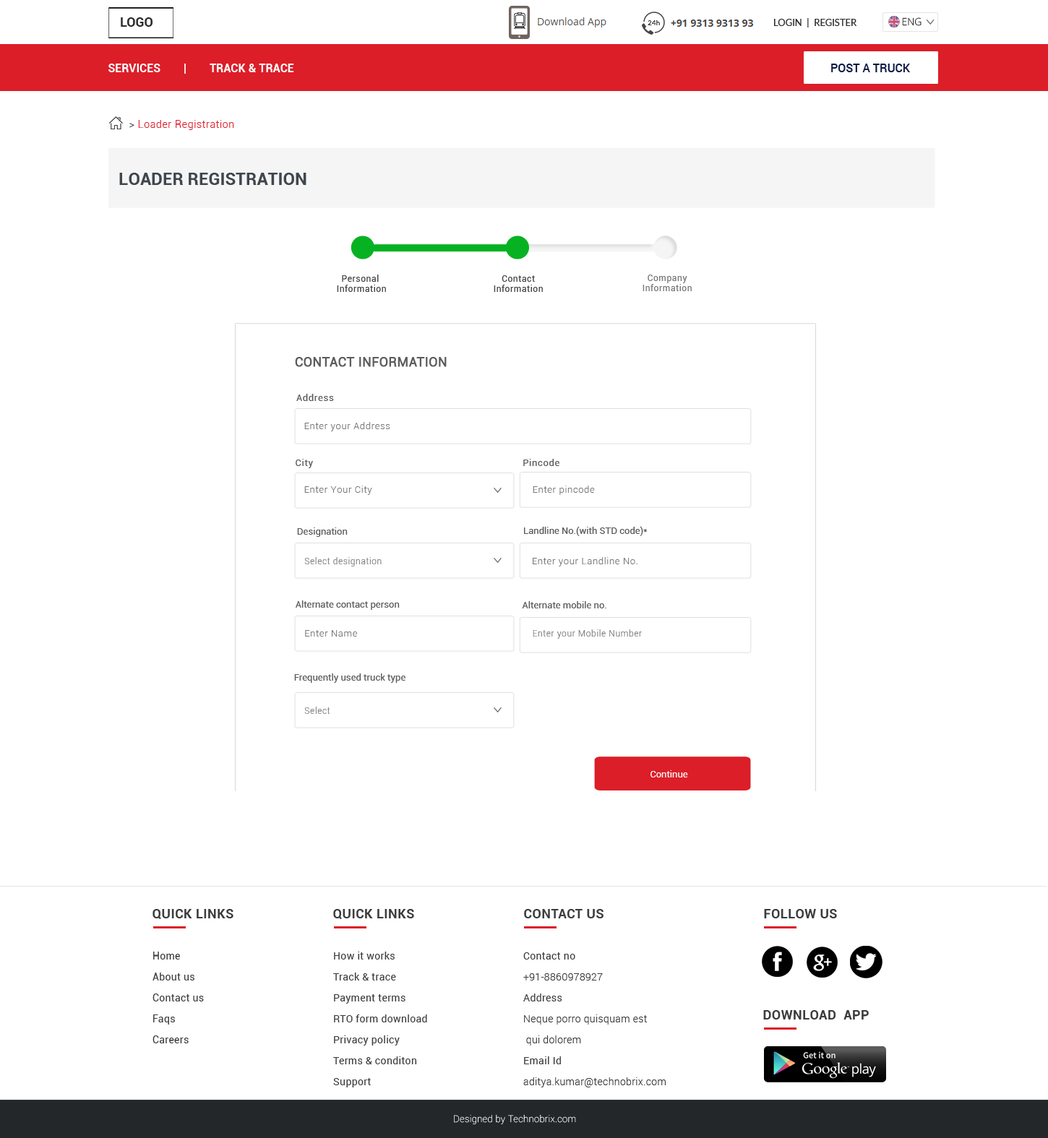
<style>
.page{position:relative;width:1048px;height:1138px;background:#ffffff}
.page>*{position:absolute;margin:0}
.t1{font:13px "Roboto-Bold";color:#2c2c2c}
.t2{font:10.1px "OpenSans-Light";color:#2c2c2c}
.t3{font:9.4px "Lato-Regular";color:#2c2c2c;text-transform:uppercase}
.t4{font:11.6px "Roboto-Bold";color:#ffffff;text-transform:uppercase}
.t5{font:11.6px "Roboto-Medium";color:#0d1a41}
.t6{font:10.1px "Roboto-Light";letter-spacing:0.05em;color:#dc1e28}
.t7{font:10.1px "Roboto-Light";letter-spacing:0.05em;color:#3f464e}
.t8{font:17.3px "Roboto-Bold";color:#3f464e;text-transform:uppercase}
.t9{font:8.7px/10.1px "Roboto-Regular";letter-spacing:0.05em;color:#444444}
.t10{font:8.7px/10.1px "Roboto-Regular";letter-spacing:0.05em;color:#777777}
.t11{font:13px "Roboto-Regular";color:#5c5c5c;font-weight:bold}
.t12{font:9.4px "Roboto-Regular";letter-spacing:0.05em;color:#5c5c5c}
.t13{font:9.4px "Roboto-Light";letter-spacing:0.05em;color:#777777}
.t14{font:9.4px "Roboto-Regular";color:#5c5c5c}
.t15{font:8.7px "Roboto-Light";letter-spacing:0.05em;color:#777777}
.t16{font:9.4px "Roboto-Regular";color:#ffffff}
.t17{font:13px "Roboto-Bold";letter-spacing:0.025em;color:#3c3c3c}
.t18{font:10.1px/21px "Roboto-Regular";letter-spacing:0.025em;color:#3c3c3c}
.t19{font:10.1px/21px "Roboto-Light";letter-spacing:0.025em;color:#3c3c3c}
.t20{font:9.4px "Roboto-Thin";letter-spacing:0.025em;color:#ffffff}
</style>
<div class="page">
<p class="t1" style="left:121px;top:17px;width:31px;height:10px">LOGO</p>
<p class="t2" style="left:902px;top:17px;width:19px;height:9px">ENG</p>
<p class="t3" style="left:774px;top:18px;width:83px;height:9px">Login  |  Register</p>
<p class="t4" style="left:108px;top:64px;width:186px;height:10px">Services        |        Track &amp; TraCe</p>
<p class="t5" style="left:831px;top:64px;width:79px;height:8px">POST A TRUCK</p>
<p class="t6" style="left:129px;top:120px;width:105px;height:10px"><span class="t7">&gt; </span>Loader Registration</p>
<p class="t8" style="left:119px;top:173px;width:187px;height:12px">Loader Registration</p>
<p class="t9" style="left:337px;top:275px;width:49px;height:17px;text-align:center">Personal <br>Information</p>
<p class="t9" style="left:494px;top:275px;width:49px;height:17px;text-align:center">Contact<br>Information</p>
<p class="t10" style="left:642px;top:275px;width:50px;height:16px;text-align:center">Company<br>Information</p>
<p class="t11" style="left:295px;top:357px;width:152px;height:10px">CONTACT INFORMATION</p>
<p class="t12" style="left:296px;top:394px;width:38px;height:7px">Address</p>
<p class="t13" style="left:304px;top:422px;width:86px;height:9px">Enter your Address</p>
<p class="t12" style="left:296px;top:459px;width:17px;height:9px">City</p>
<p class="t12" style="left:523px;top:459px;width:36px;height:7px">Pincode</p>
<p class="t13" style="left:304px;top:486px;width:68px;height:9px">Enter Your City</p>
<p class="t13" style="left:533px;top:486px;width:62px;height:9px">Enter pincode</p>
<p class="t14" style="left:297px;top:527px;width:51px;height:10px">Designation</p>
<p class="t14" style="left:524px;top:526px;width:123px;height:10px">Landline No.(with STD code)*</p>
<p class="t15" style="left:304px;top:557px;width:78px;height:10px">Select designation</p>
<p class="t13" style="left:533px;top:557px;width:104px;height:10px">Enter your Landline No.</p>
<p class="t14" style="left:296px;top:600px;width:104px;height:10px"><span class="t12"> </span>Alternate contact person</p>
<p class="t14" style="left:522px;top:601px;width:84px;height:7px"><span class="t12"> </span>Alternate mobile no.</p>
<p class="t15" style="left:533px;top:629px;width:109px;height:10px">Enter your Mobile Number</p>
<p class="t13" style="left:305px;top:630px;width:52px;height:7px">Enter Name</p>
<p class="t14" style="left:294px;top:673px;width:111px;height:10px">Frequently used truck type</p>
<p class="t15" style="left:304px;top:707px;width:26px;height:7px">Select</p>
<p class="t16" style="left:650px;top:770px;width:38px;height:8px">Continue</p>
<p class="t17" style="left:152px;top:909px;width:81px;height:10px">QUICK LINKS</p>
<p class="t17" style="left:333px;top:909px;width:81px;height:10px">QUICK LINKS</p>
<p class="t17" style="left:524px;top:909px;width:79px;height:9px">CONTACT US</p>
<p class="t17" style="left:764px;top:909px;width:73px;height:9px">FOLLOW US</p>
<p class="t18" style="left:152px;top:952px;width:52px;height:91px">Home<br>About us <br>Contact us<br>Faqs<br>Careers</p>
<p class="t18" style="left:333px;top:952px;width:94px;height:135px">How it works<br>Track &amp; trace<br>Payment terms<br>RTO form download<br>Privacy policy <br>Terms &amp; conditon<br>Support</p>
<p class="t19" style="left:523px;top:952px;width:143px;height:135px"><span class="t18">Contact no<br></span>+91-8860978927<br><span class="t18">Address<br></span>Neque porro quisquam est<br> qui dolorem<br><span class="t18">Email Id<br></span>aditya.kumar@technobrix.com</p>
<p class="t17" style="left:763px;top:1010px;width:106px;height:10px">DOWNLOAD  APP</p>
<p class="t20" style="left:454px;top:1114px;width:122px;height:10px">Designed by Technobrix.com</p>
</div>
